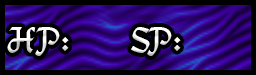
<style>
.page{position:relative;width:256px;height:75px;background:#000000}
.page>*{position:absolute;margin:0}
.t1{font:37.5px "DS_Mysticora";color:#ffffff}
</style>
<div class="page">
<p class="t1" style="left:7px;top:27px;width:174px;height:29px">HP:   SP:</p>
</div>
